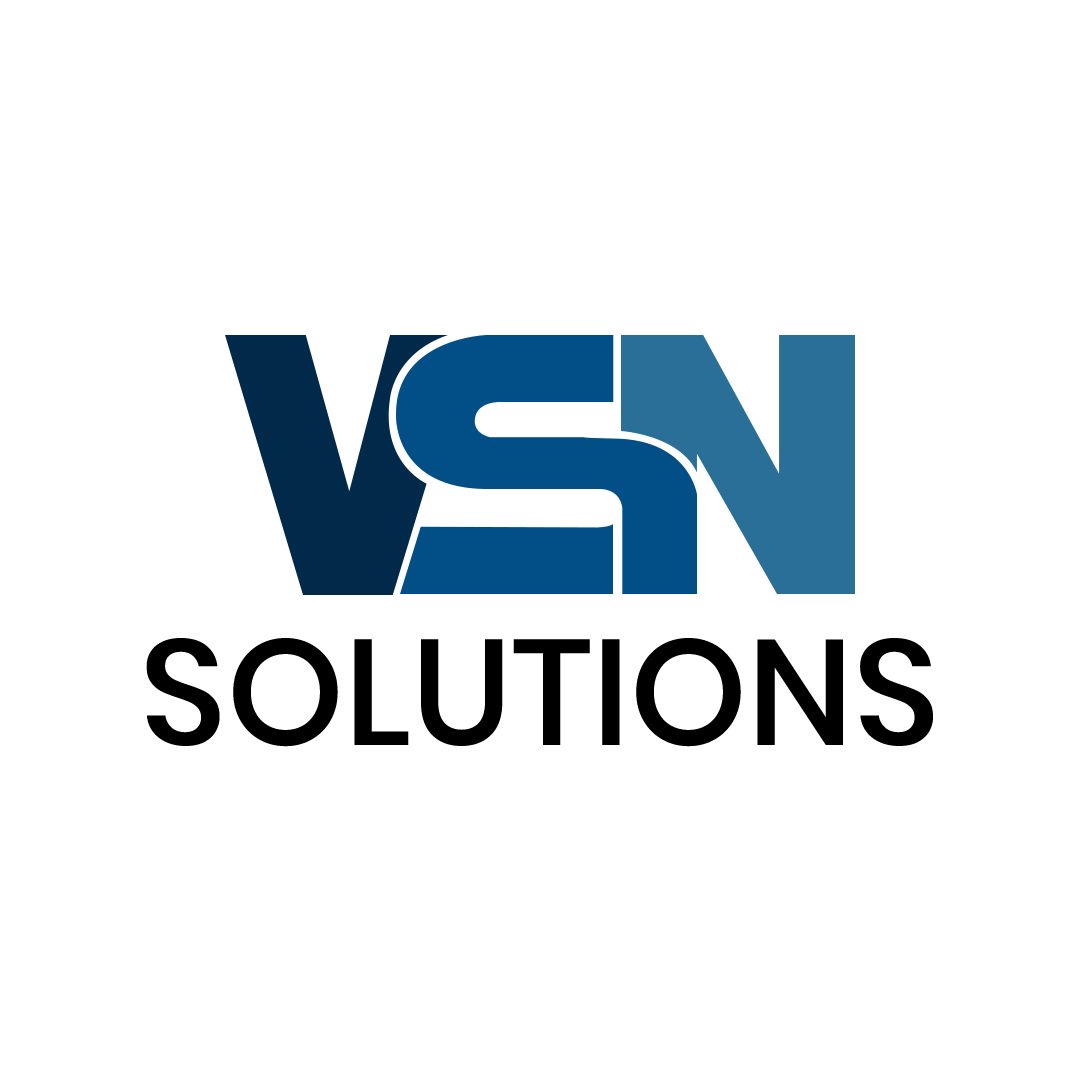
<style>
.page{position:relative;width:1080px;height:1080px;background:#ffffff}
.page>*{position:absolute;margin:0}
.t1{font:149.3px "Poppins-Medium";color:#000000}
</style>
<div class="page">
<p class="t1" style="left:146px;top:638px;width:787px;height:109px">SOLUTIONS</p>
</div>
